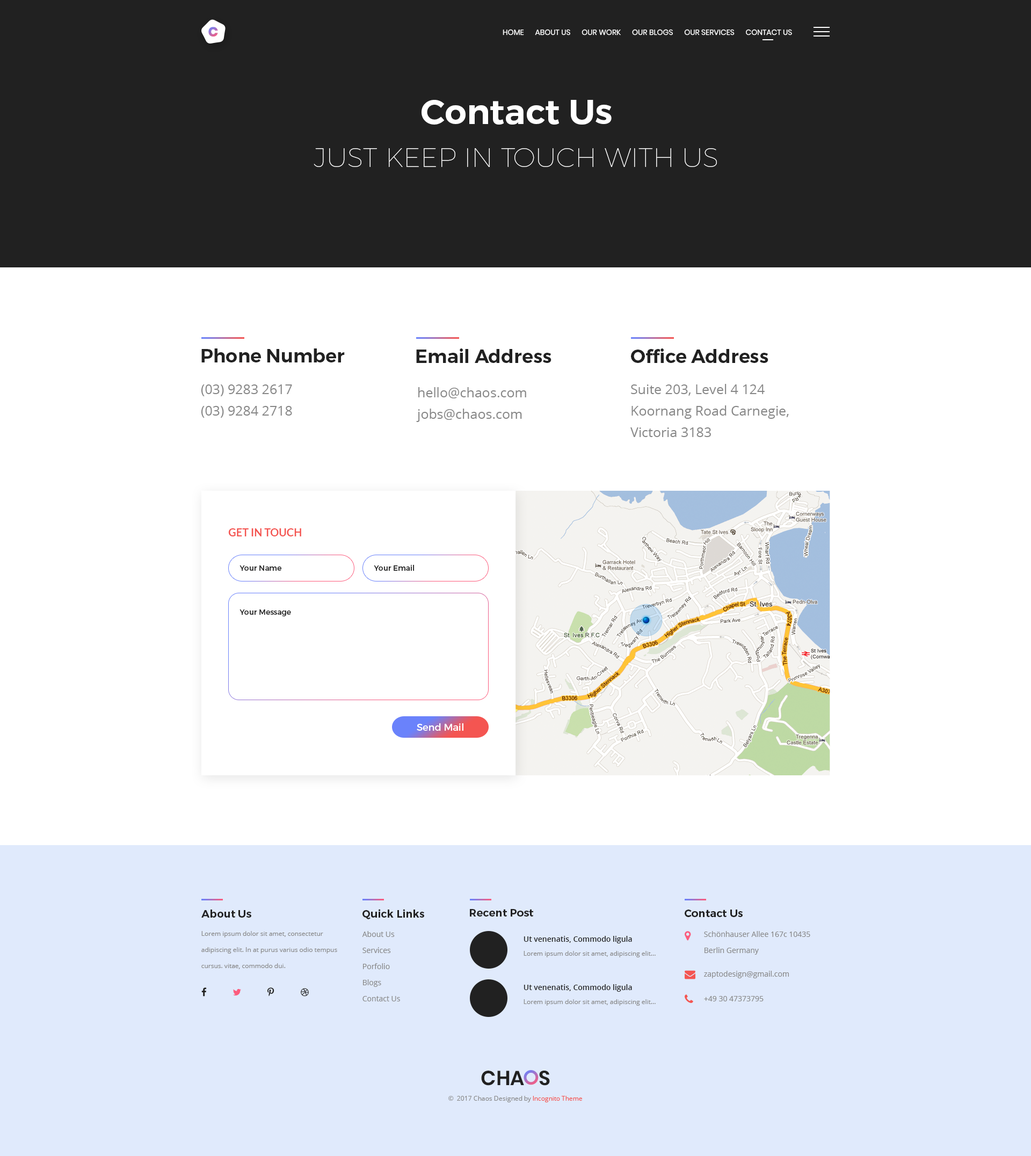
<style>
.page{position:relative;width:1031px;height:1156px;background:#ffffff}
.page>*{position:absolute;margin:0}
.t1{font:13.4px "Poppins-ExtraBold";text-transform:uppercase}
.t2{font:7.5px "Poppins-Regular";color:#ffffff;text-transform:uppercase}
.t3{font:26.9px/43px "Montserrat-Hairline";color:#ffffff;text-transform:uppercase}
.t4{font:34.9px/43px "Montserrat-SemiBold";color:#ffffff}
.t5{font:18.8px "Montserrat-SemiBold";color:#212121}
.t6{font:13.4px/21.5px "OpenSans";color:#878787}
.t7{font:10.8px "Lato-Bold";color:#f45551;text-transform:uppercase}
.t8{font:7.5px "Montserrat-Regular";color:#212121}
.t9{font:9.7px "Montserrat-Regular";color:#ffffff}
.t10{font:10.7px "Montserrat-SemiBold";color:#212121}
.t11{font:6.4px/16.1px "OpenSans";color:#888888}
.t12{font:7.5px/16.1px "OpenSans";color:#888888}
.t13{font:7.5px "OpenSans-Semibold";color:#212121}
.t14{font:6.4px "OpenSans";color:#888888}
.t15{font:7.5px "OpenSans";color:#888888}
.t16{font:20.3px "Poppins-SemiBold";color:#212121;text-transform:uppercase}
.t17{font:6.4px "OpenSans";color:#f45551}
</style>
<div class="page">
<p class="t1" style="left:208px;top:27px;width:10px;height:10px">C</p>
<p class="t2" style="left:503px;top:29px;width:289px;height:6px">HOME      ABOUT US      Our Work      OUR BLOGS      Our SERVICES      CONTACT US</p>
<p class="t3" style="left:314px;top:100px;width:403px;height:67px;text-align:center"><span class="t4">Contact Us<br></span>Just Keep in Touch With Us</p>
<p class="t5" style="left:201px;top:349px;width:144px;height:14px">Phone Number</p>
<p class="t5" style="left:416px;top:349px;width:136px;height:14px">Email Address</p>
<p class="t5" style="left:631px;top:349px;width:138px;height:14px">Office Address</p>
<p class="t6" style="left:201px;top:385px;width:91px;height:33px">(03) 9283 2617 <br>(03) 9284 2718</p>
<p class="t6" style="left:416px;top:387px;width:110px;height:35px">hello@chaos.com<br>jobs@chaos.com</p>
<p class="t6" style="left:631px;top:384px;width:158px;height:53px">Suite 203, Level 4 124 <br>Koornang Road Carnegie, <br>Victoria 3183</p>
<p class="t7" style="left:228px;top:528px;width:73px;height:9px">Get in Touch</p>
<p class="t8" style="left:240px;top:566px;width:41px;height:5px">Your Name</p>
<p class="t8" style="left:374px;top:565px;width:40px;height:6px">Your Email</p>
<p class="t8" style="left:240px;top:610px;width:51px;height:7px">Your Message</p>
<p class="t9" style="left:417px;top:723px;width:47px;height:8px">Send Mail</p>
<p class="t10" style="left:201px;top:910px;width:50px;height:8px">About Us</p>
<p class="t10" style="left:363px;top:909px;width:61px;height:10px">Quick Links</p>
<p class="t10" style="left:470px;top:909px;width:63px;height:8px">Recent Post</p>
<p class="t10" style="left:685px;top:910px;width:58px;height:7px">Contact Us</p>
<p class="t11" style="left:201px;top:931px;width:136px;height:38px">Lorem ipsum dolor sit amet, consectetur adipiscing elit. In at purus varius odio tempus cursus. vitae, commodo dui.</p>
<p class="t12" style="left:362px;top:931px;width:38px;height:71px">About Us<br>Services<br>Porfolio<br>Blogs<br>Contact Us</p>
<p class="t13" style="left:524px;top:936px;width:108px;height:8px">Ut venenatis, Commodo ligula</p>
<p class="t12" style="left:704px;top:931px;width:106px;height:24px">Schönhauser Allee 167c 10435 <br>Berlin Germany</p>
<p class="t14" style="left:524px;top:951px;width:132px;height:7px">Lorem ipsum dolor sit amet, adipiscing elit...</p>
<p class="t15" style="left:704px;top:971px;width:85px;height:8px">zaptodesign@gmail.com</p>
<p class="t13" style="left:524px;top:984px;width:108px;height:8px">Ut venenatis, Commodo ligula</p>
<p class="t14" style="left:524px;top:1000px;width:132px;height:6px">Lorem ipsum dolor sit amet, adipiscing elit...</p>
<p class="t15" style="left:704px;top:996px;width:60px;height:6px">+49 30 47373795</p>
<p class="t16" style="left:481px;top:1071px;width:69px;height:15px">Cha s</p>
<p class="t14" style="left:448px;top:1096px;width:134px;height:7px">©  2017 Chaos Designed by <span class="t17">Incognito Theme</span></p>
</div>
